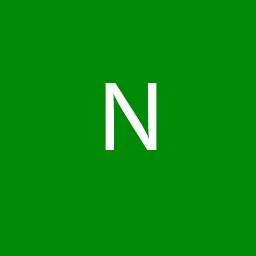
<style>
.page{position:relative;width:256px;height:256px;background:#008b07}
.page>*{position:absolute;margin:0}
.t1{font:100px "MyriadPro-Regular";color:#ffffff}
</style>
<div class="page">
<p class="t1" style="left:105px;top:83px;width:52px;height:67px">N</p>
</div>
